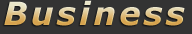
<style>
.page{position:relative;width:192px;height:34px;background:#333333}
.page>*{position:absolute;margin:0}
.t1{font:32px "Verdana-BoldItalic";letter-spacing:0.1em}
</style>
<div class="page">
<p class="t1" style="left:4px;top:0px;width:181px;height:26px">Business</p>
</div>
